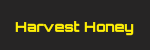
<style>
.page{position:relative;width:150px;height:50px;background:#262525}
.page>*{position:absolute;margin:0}
.t1{font:14px "Orbitron-Bold";color:#fff004}
</style>
<div class="page">
<p class="t1" style="left:15px;top:21px;width:119px;height:15px">Harvest Honey</p>
</div>
